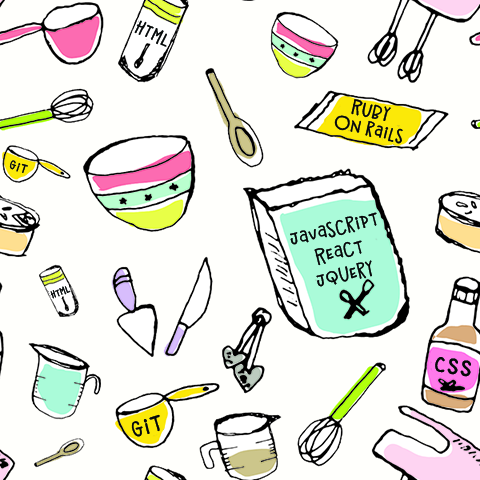
<style>
.page{position:relative;width:480px;height:480px;background:#fffffc}
.page>*{position:absolute;margin:0}
.t1{font:17px "StrawberryDreamsAlternates";letter-spacing:0.04em;color:#060808}
.t2{font:17px/18.3px "StrawberryDreamsAlternates";letter-spacing:0.04em;color:#060808}
.t3{font:12.6px "StrawberryDreamsAlternates";letter-spacing:0.04em;color:#060808}
.t4{font:18.4px/23.3px "StrawberryDreamsAlternates";letter-spacing:0.02em;color:#060808}
.t5{font:9.1px "StrawberryDreamsAlternates";letter-spacing:0.04em;color:#060808}
.t6{font:27.9px "StrawberryDreamsAlternates";letter-spacing:0.04em;color:#060808}
.t7{font:22.6px "StrawberryDreamsAlternates";letter-spacing:0.04em;color:#060808}
</style>
<div class="page">
<p class="t1" style="left:134px;top:20px;width:33px;height:27px;rotate:26deg">HTML</p>
<p class="t2" style="left:334px;top:99px;width:69px;height:45px;text-align:center;rotate:13deg">Ruby <br>on rails</p>
<p class="t3" style="left:9px;top:160px;width:19px;height:13px;rotate:18deg">Git</p>
<p class="t4" style="left:290px;top:212px;width:87px;height:75px;text-align:center;rotate:-13deg">javascript<br>React<br>jQuery</p>
<p class="t5" style="left:50px;top:286px;width:21px;height:13px;rotate:-21deg">HTML</p>
<p class="t6" style="left:435px;top:357px;width:36px;height:20px;rotate:10deg">CSS</p>
<p class="t7" style="left:131px;top:414px;width:29px;height:23px;rotate:-14deg">Git</p>
</div>
